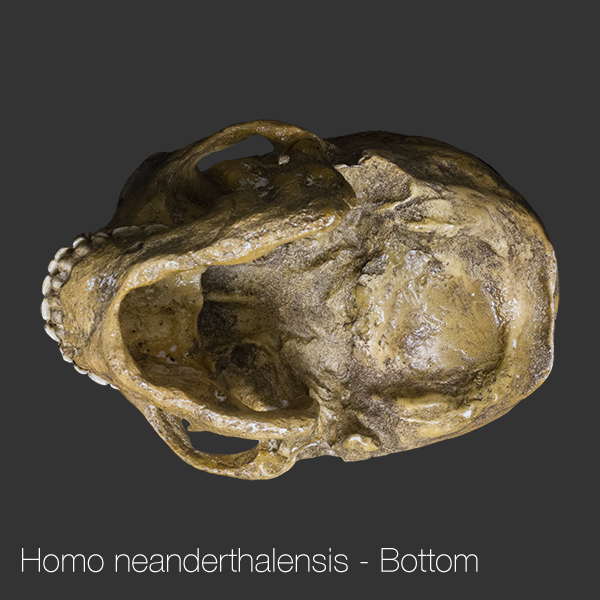
<style>
.page{position:relative;width:600px;height:600px;background:#333333}
.page>*{position:absolute;margin:0}
.t1{font:33.3px "HelveticaNeue-Thin";color:#ffffff}
</style>
<div class="page">
<p class="t1" style="left:22px;top:548px;width:456px;height:25px">Homo neanderthalensis - Bottom</p>
</div>
